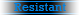
<style>
.page{position:relative;width:80px;height:15px}
.page>*{position:absolute;margin:0}
.t1{font:12px "Rockwell";letter-spacing:0.025em;color:#0085e6}
</style>
<div class="page">
<p class="t1" style="left:14px;top:3px;width:52px;height:8px">Resistant</p>
</div>
